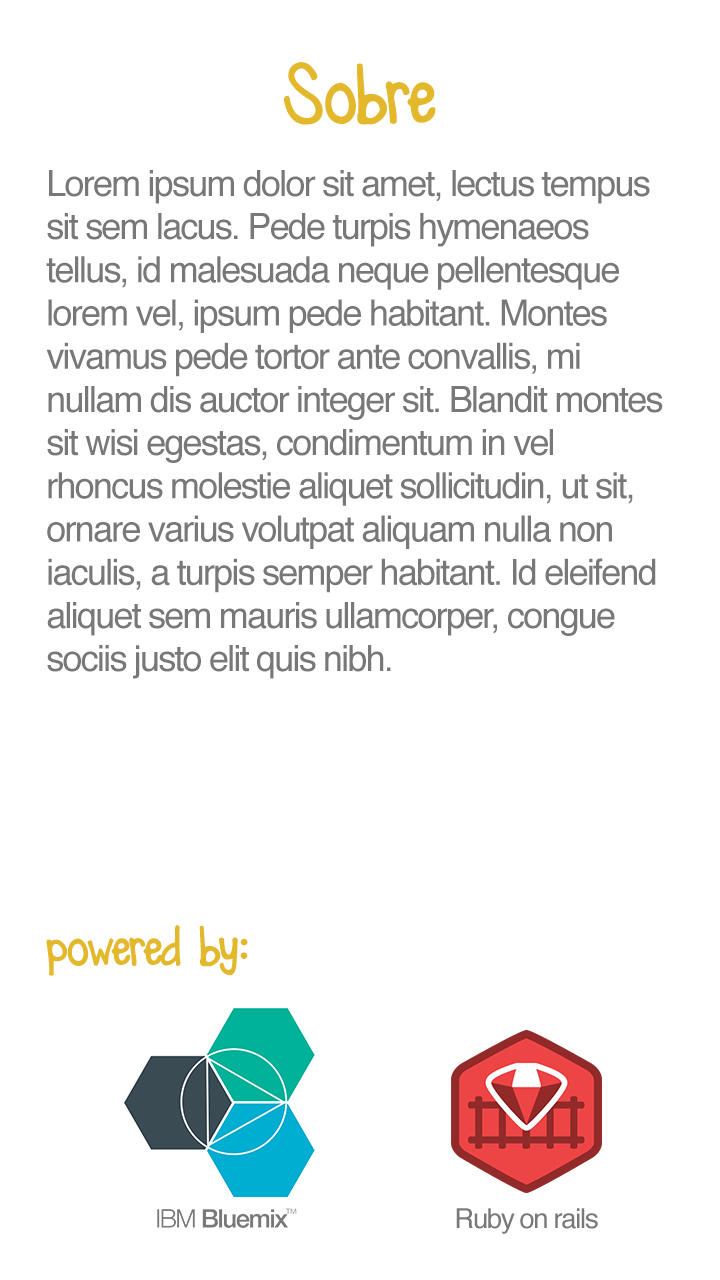
<style>
.page{position:relative;width:720px;height:1280px;background:#ffffff}
.page>*{position:absolute;margin:0}
.t1{font:72px "KGRayofSunshine";letter-spacing:-0.05em;color:#e3b92b}
.t2{font:36px "Helvetica";letter-spacing:-0.05em;color:#787878}
.t3{font:48px "KGRayofSunshine";letter-spacing:-0.05em;color:#e3b92b}
.t4{font:27.5px "Helvetica";letter-spacing:-0.05em;color:#787878}
</style>
<div class="page">
<p class="t1" style="left:283px;top:62px;width:153px;height:63px">Sobre</p>
<p class="t2" style="left:46px;top:170px;width:617px;height:509px">Lorem ipsum dolor sit amet, lectus tempus sit sem lacus. Pede turpis hymenaeos tellus, id malesuada neque pellentesque lorem vel, ipsum pede habitant. Montes vivamus pede tortor ante convallis, mi nullam dis auctor integer sit. Blandit montes sit wisi egestas, condimentum in vel rhoncus molestie aliquet sollicitudin, ut sit, ornare varius volutpat aliquam nulla non iaculis, a turpis semper habitant. Id eleifend aliquet sem mauris ullamcorper, congue sociis justo elit quis nibh.</p>
<p class="t3" style="left:46px;top:925px;width:202px;height:51px">powered by:</p>
<p class="t4" style="left:456px;top:1208px;width:142px;height:26px">Ruby on rails</p>
</div>
